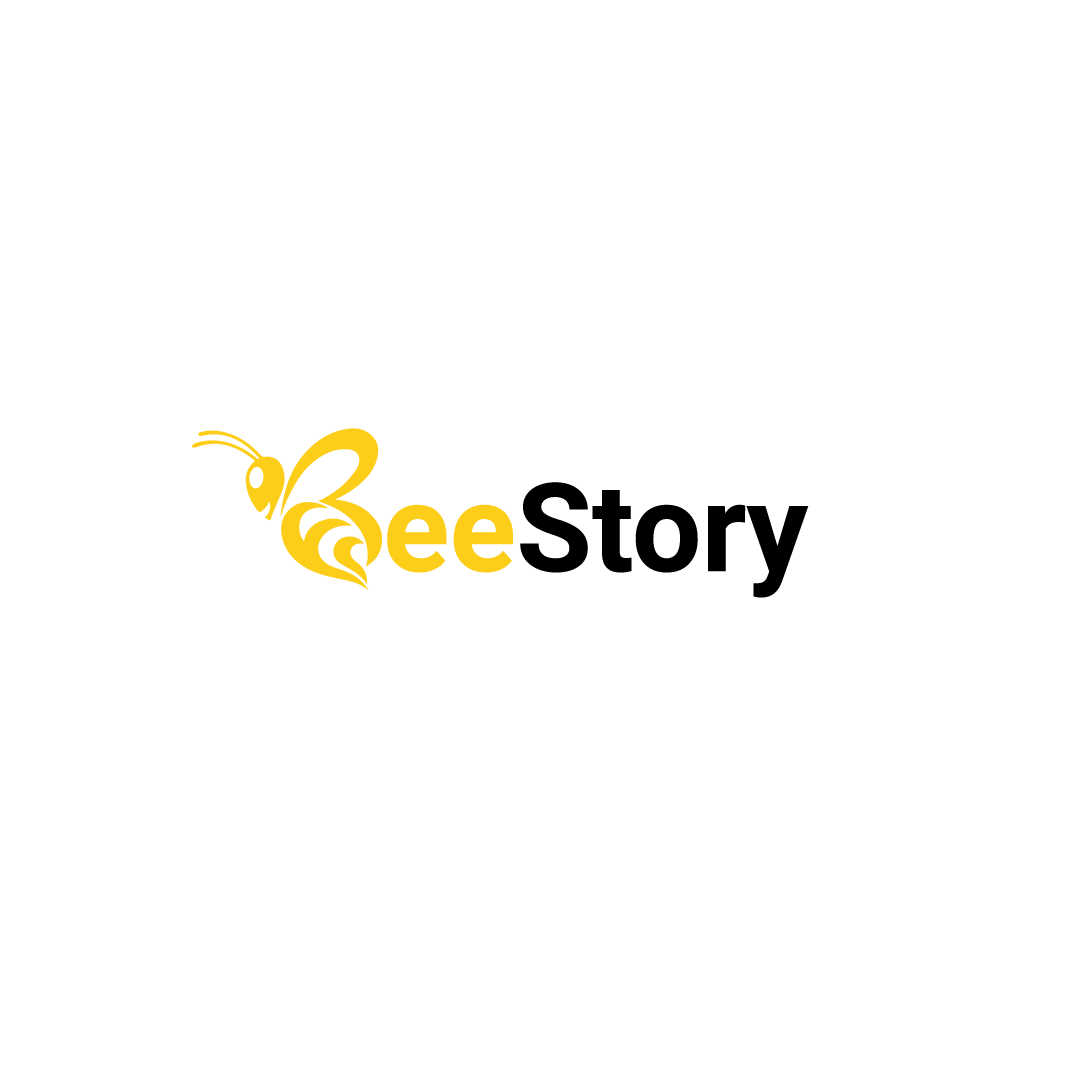
<style>
.page{position:relative;width:1080px;height:1080px;background:#ffffff}
.page>*{position:absolute;margin:0}
.t1{font:123.3px "Roboto-Bold";color:#000000}
.t2{font:123.3px "Roboto-Bold";color:#fcce19}
</style>
<div class="page">
<p class="t1" style="left:387px;top:482px;width:422px;height:116px"><span class="t2">ee</span>Story</p>
</div>
